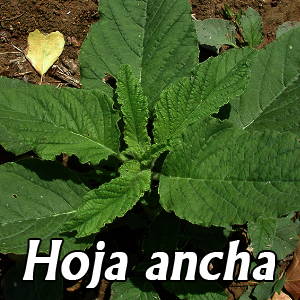
<style>
.page{position:relative;width:300px;height:300px}
.page>*{position:absolute;margin:0}
.t1{font:55.6px "Narkisim";color:#ffffff;font-weight:bold;font-style:italic}
</style>
<div class="page">
<p class="t1" style="left:22px;top:240px;width:253px;height:48px">Hoja ancha</p>
</div>
